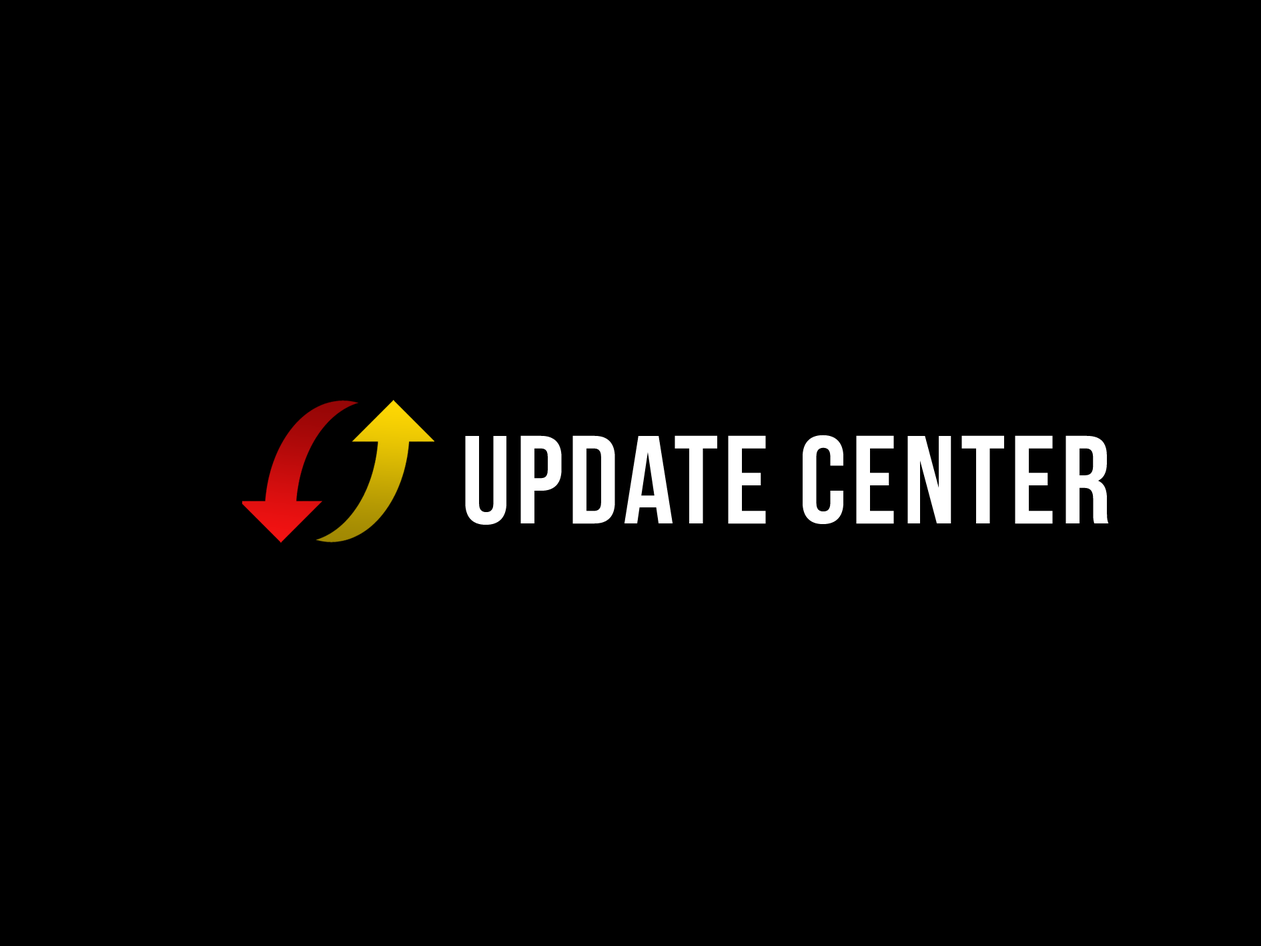
<style>
.page{position:relative;width:1261px;height:946px;background:#000000}
.page>*{position:absolute;margin:0}
.t1{font:124.6px "BebasNeueBold";letter-spacing:0.04em;color:#ffffff}
</style>
<div class="page">
<p class="t1" style="left:465px;top:434px;width:644px;height:90px">update center</p>
</div>
